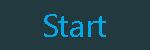
<style>
.page{position:relative;width:150px;height:50px;background:#233940}
.page>*{position:absolute;margin:0}
.t1{font:32px "SegoeUI";color:#00a9e7}
</style>
<div class="page">
<p class="t1" style="left:44px;top:14px;width:62px;height:23px">Start</p>
</div>
